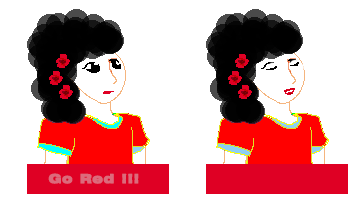
<style>
.page{position:relative;width:364px;height:200px;background:#ffffff}
.page>*{position:absolute;margin:0}
.t1{font:21.4px "Swiss721BT-BlackExtended";letter-spacing:0.035em;color:#dc6a7c;font-weight:bold}
</style>
<div class="page">
<p class="t1" style="left:48px;top:173px;width:91px;height:11px">Go Red !!!</p>
</div>
